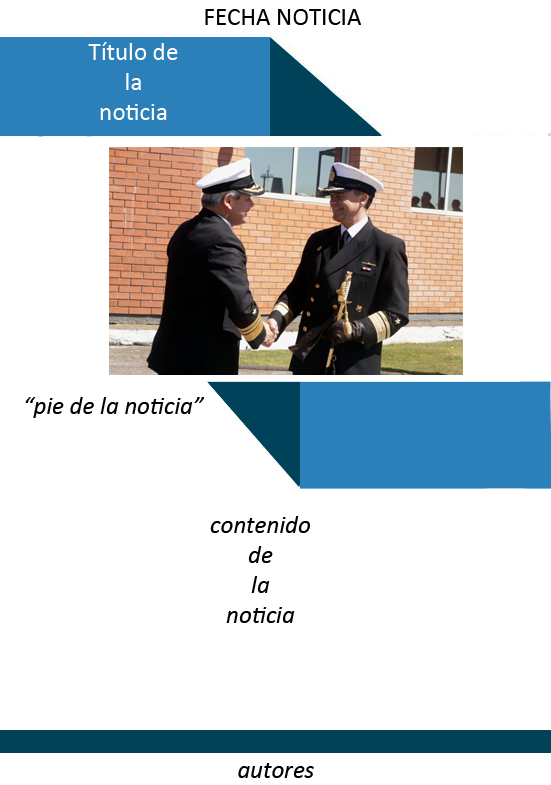
<style>
.page{position:relative;width:551px;height:785px;background:#ffffff}
.page>*{position:absolute;margin:0}
.t1{font:25px "Calibri";color:#000000}
.t2{font:25px "Calibri";color:#ffffff}
.t3{font:25px "Calibri-Italic";color:#000000}
</style>
<div class="page">
<p class="t1" style="left:205px;top:9px;width:156px;height:16px">FECHA NOTICIA</p>
<p class="t2" style="left:88px;top:42px;width:90px;height:78px;text-align:center">Título de <br>la <br>noticia</p>
<p class="t3" style="left:25px;top:397px;width:179px;height:21px">“pie de la noticia”</p>
<p class="t3" style="left:210px;top:516px;width:100px;height:107px;text-align:center">contenido <br>de <br>la <br>noticia</p>
<p class="t3" style="left:238px;top:763px;width:76px;height:15px">autores</p>
</div>
